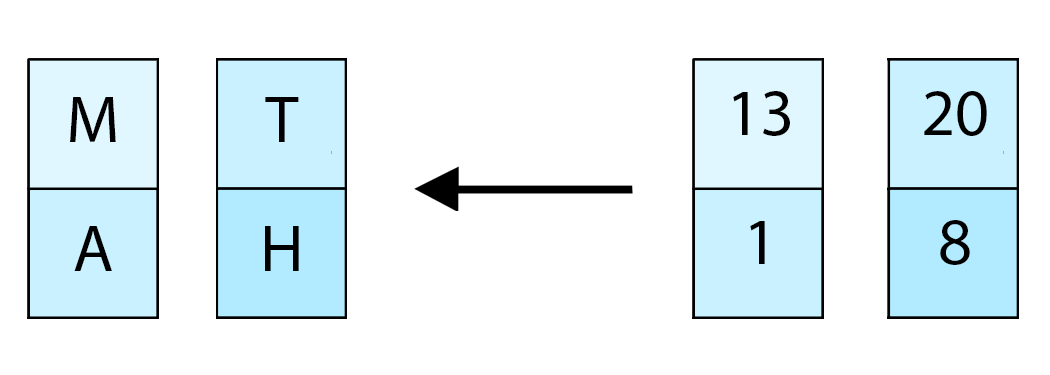
<style>
.page{position:relative;width:1050px;height:375px;background:#ffffff}
.page>*{position:absolute;margin:0}
.t1{font:66.7px "MyriadPro-Regular";color:#000000}
</style>
<div class="page">
<p class="t1" style="left:70px;top:97px;width:46px;height:45px">M</p>
<p class="t1" style="left:265px;top:97px;width:34px;height:45px">T</p>
<p class="t1" style="left:733px;top:91px;width:57px;height:45px">13</p>
<p class="t1" style="left:924px;top:91px;width:63px;height:45px">20</p>
<p class="t1" style="left:750px;top:221px;width:15px;height:43px">1</p>
<p class="t1" style="left:940px;top:220px;width:30px;height:45px">8</p>
<p class="t1" style="left:74px;top:226px;width:38px;height:45px">A</p>
<p class="t1" style="left:265px;top:226px;width:34px;height:45px">H</p>
</div>
